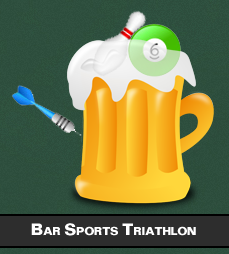
<style>
.page{position:relative;width:229px;height:254px}
.page>*{position:absolute;margin:0}
.t1{font:16px "FolioICG-Bold";color:#ffffff;font-variant:small-caps}
</style>
<div class="page">
<p class="t1" style="left:31px;top:223px;width:165px;height:13px">Bar Sports Triathlon</p>
</div>
